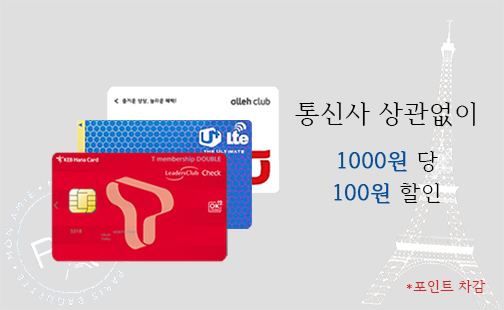
<style>
.page{position:relative;width:504px;height:310px;background:#dfdfdf}
.page>*{position:absolute;margin:0}
.t1{font:26px/31.7px "HCRBatang";color:#000000}
.t2{font:22.4px/31.7px "HCRBatang";color:#005199;font-weight:bold}
.t3{font:22.4px/31.7px "HCRBatang";color:#000000}
.t4{font:14px/30px "HCRBatang";color:#da2424}
</style>
<div class="page">
<p class="t1" style="left:295px;top:102px;width:191px;height:191px;text-align:center">통신사 상관없이<br><br><span class="t2">1000원 </span><span class="t3">당<br></span><span class="t2">100원</span><span class="t3"> 할인<br><br></span><span class="t4"><br>*포인트 차감</span></p>
</div>
